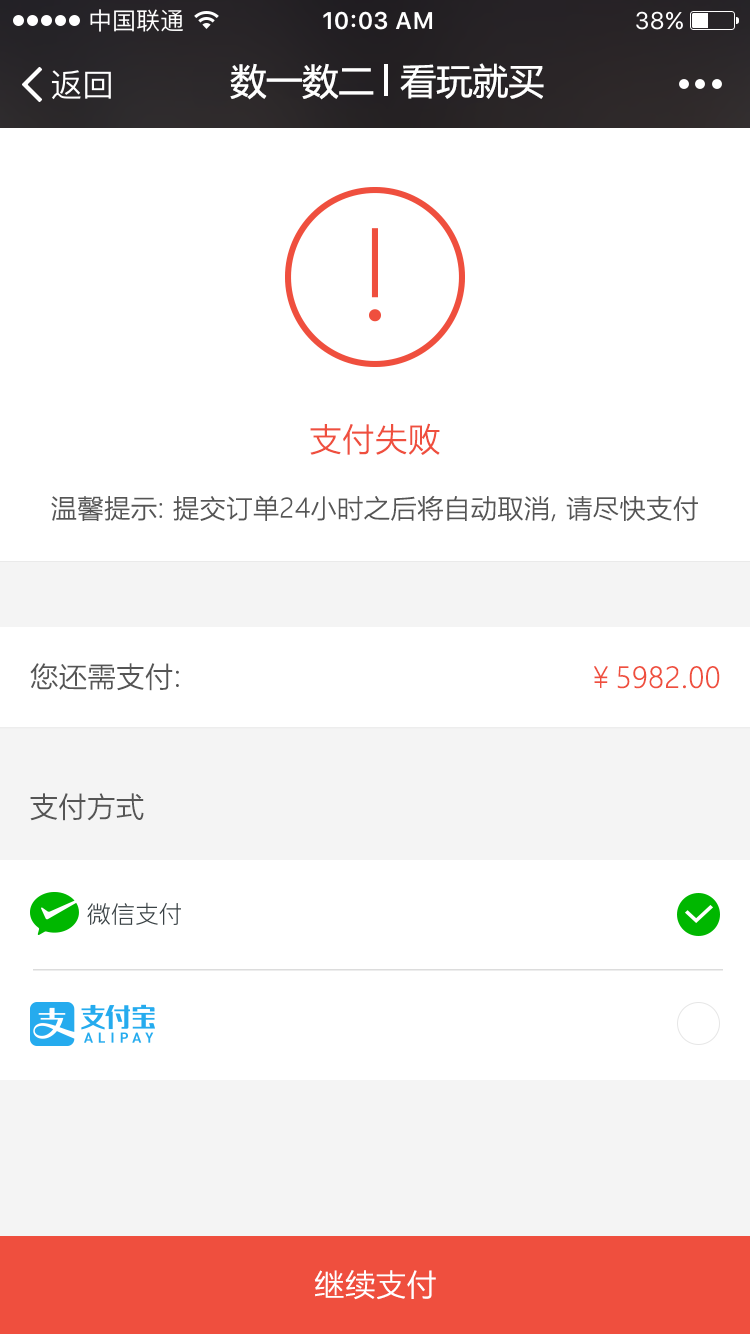
<style>
.page{position:relative;width:750px;height:1334px;background:#ffffff}
.page>*{position:absolute;margin:0}
.t1{font:36px "MicrosoftYaHei";color:#ffffff}
.t2{font:32px "MicrosoftYaHeiLight";color:#ef4f3e;font-weight:bold}
.t3{font:26px "MicrosoftYaHeiLight";color:#555555;font-weight:bold}
.t4{font:28px "MicrosoftYaHeiLight";color:#555555;font-weight:bold}
.t5{font:28px "MicrosoftYaHeiLight";color:#ef4f3e;font-weight:bold}
.t6{font:30px "MicrosoftYaHeiLight";color:#ffffff;font-weight:bold}
</style>
<div class="page">
<p class="t1" style="left:230px;top:63px;width:144px;height:37px">数一数二</p>
<p class="t1" style="left:400px;top:63px;width:144px;height:36px">看玩就买</p>
<p class="t2" style="left:310px;top:423px;width:130px;height:32px">支付失败</p>
<p class="t3" style="left:51px;top:495px;width:647px;height:27px">温馨提示: 提交订单24小时之后将自动取消, 请尽快支付</p>
<p class="t4" style="left:30px;top:663px;width:149px;height:28px">您还需支付:</p>
<p class="t5" style="left:594px;top:666px;width:126px;height:23px">￥5982.00</p>
<p class="t4" style="left:30px;top:793px;width:114px;height:28px">支付方式</p>
<p class="t6" style="left:314px;top:1270px;width:122px;height:30px">继续支付</p>
</div>
